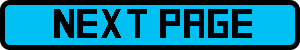
<style>
.page{position:relative;width:300px;height:50px;background:#00bff3}
.page>*{position:absolute;margin:0}
.t1{font:42px "SquareFont";color:#000000}
</style>
<div class="page">
<p class="t1" style="left:54px;top:9px;width:198px;height:29px">NEXT PAGE</p>
</div>
